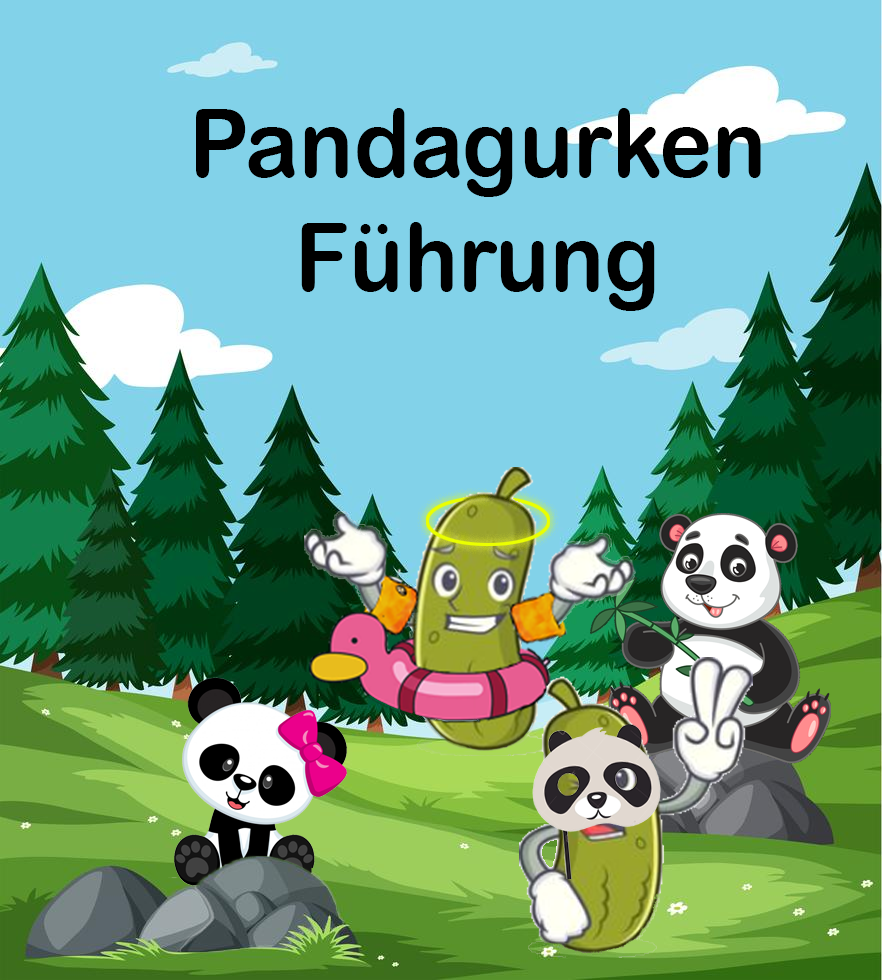
<style>
.page{position:relative;width:882px;height:980px;background:#82d2e9}
.page>*{position:absolute;margin:0}
.t1{font:95.2px "ArialRoundedMTBold";color:#000000;scale:0.95 1}
</style>
<div class="page">
<p class="t1" style="left:196px;top:108px;width:565px;height:203px;text-align:center">Pandagurken<br>Führung</p>
</div>
